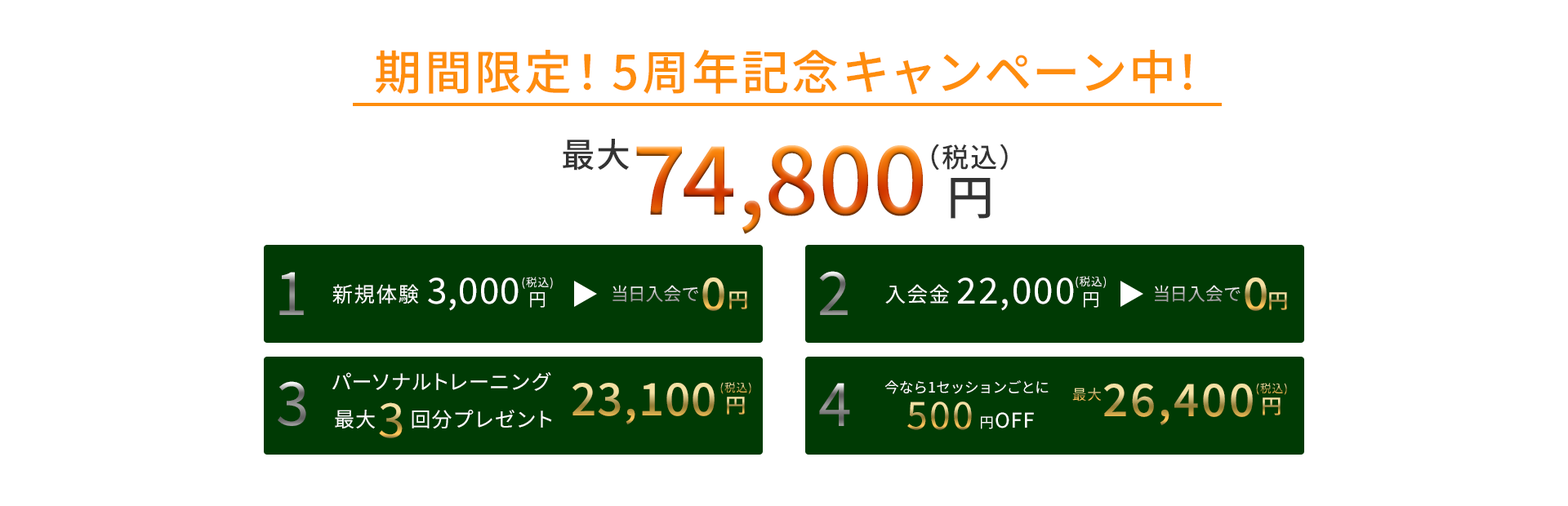
<style>
.page{position:relative;width:1568px;height:506px;background:#ffffff}
.page>*{position:absolute;margin:0}
.t1{font:47.6px "NotoSansCJKjp-Medium";letter-spacing:0.05em;color:#fe8d0d}
.t2{font:34px "NotoSansCJKjp-Medium";letter-spacing:0.05em;color:#333333}
.t3{font:95.3px "NotoSansCJKjp-Medium";letter-spacing:0.05em}
.t4{font:27.2px "NotoSansCJKjp-Medium";letter-spacing:0.05em;color:#333333}
.t5{font:47.6px "NotoSansCJKjp-Medium";letter-spacing:0.05em;color:#333333}
.t6{font:59.8px "NotoSansCJKjp-Regular";letter-spacing:0.05em}
.t7{font:35.9px "NotoSansCJKjp-Regular";letter-spacing:0.05em;color:#ffffff}
.t8{font:11.3px "NotoSansCJKjp-Regular";letter-spacing:0.05em;color:#ffffff}
.t9{font:44.9px "NotoSansCJKjp-Medium";letter-spacing:0.05em}
.t10{font:20.9px "NotoSansCJKjp-Regular";letter-spacing:0.05em;color:#ffffff}
.t11{font:18px "NotoSansCJKjp-Regular";letter-spacing:0.05em;color:#ffffff}
.t12{font:17.9px "NotoSansCJKjp-Regular";letter-spacing:0.05em}
.t13{font:20.9px "NotoSansCJKjp-Medium";letter-spacing:0.05em}
.t14{font:20.5px "NotoSansCJKjp-Regular";letter-spacing:0.05em;color:#ffffff}
.t15{font:11.3px "NotoSansCJKjp-Regular";letter-spacing:0.05em}
.t16{font:14.4px "NotoSansCJKjp-Regular";letter-spacing:0.05em;color:#ffffff}
.t17{font:14.4px "NotoSansCJKjp-Regular";letter-spacing:0.05em}
.t18{font:38px "NotoSansCJKjp-Regular";letter-spacing:0.05em}
.t19{font:47.6px "NotoSansCJKjp-Regular";letter-spacing:0.05em}
.t20{font:20.4px "NotoSansCJKjp-Regular";letter-spacing:0.05em;color:#ffffff}
</style>
<div class="page">
<p class="t1" style="left:376px;top:49px;width:816px;height:46px">期間限定！5周年記念キャンペーン中！</p>
<p class="t2" style="left:563px;top:139px;width:66px;height:32px">最大</p>
<p class="t3" style="left:636px;top:145px;width:287px;height:89px">74,800</p>
<p class="t4" style="left:931px;top:144px;width:77px;height:27px">（税込）</p>
<p class="t5" style="left:951px;top:178px;width:40px;height:41px">円</p>
<p class="t6" style="left:279px;top:272px;width:25px;height:43px">1</p>
<p class="t7" style="left:428px;top:278px;width:91px;height:33px">3,000</p>
<p class="t8" style="left:522px;top:277px;width:31px;height:12px">(税込)</p>
<p class="t9" style="left:702px;top:278px;width:22px;height:33px">0</p>
<p class="t6" style="left:819px;top:271px;width:29px;height:44px">2</p>
<p class="t7" style="left:957px;top:278px;width:117px;height:33px">22,000</p>
<p class="t8" style="left:1076px;top:276px;width:30px;height:12px">(税込)</p>
<p class="t9" style="left:1245px;top:278px;width:22px;height:33px">0</p>
<p class="t10" style="left:332px;top:284px;width:87px;height:20px">新規体験</p>
<p class="t11" style="left:530px;top:292px;width:15px;height:16px">円</p>
<p class="t12" style="left:612px;top:285px;width:86px;height:17px">当日入会で</p>
<p class="t13" style="left:729px;top:292px;width:18px;height:18px">円</p>
<p class="t10" style="left:885px;top:284px;width:64px;height:20px">入会金</p>
<p class="t11" style="left:1084px;top:292px;width:14px;height:16px">円</p>
<p class="t12" style="left:1155px;top:285px;width:86px;height:17px">当日入会で</p>
<p class="t13" style="left:1269px;top:292px;width:18px;height:18px">円</p>
<p class="t14" style="left:332px;top:372px;width:219px;height:19px">パーソナルトレーニング</p>
<p class="t6" style="left:278px;top:381px;width:28px;height:45px">3</p>
<p class="t9" style="left:572px;top:383px;width:143px;height:42px">23,100</p>
<p class="t15" style="left:720px;top:382px;width:31px;height:12px">(税込)</p>
<p class="t6" style="left:819px;top:383px;width:31px;height:43px">4</p>
<p class="t16" style="left:884px;top:381px;width:165px;height:13px">今なら1セッションごとに</p>
<p class="t17" style="left:1072px;top:388px;width:29px;height:14px">最大</p>
<p class="t9" style="left:1104px;top:384px;width:149px;height:41px">26,400</p>
<p class="t15" style="left:1256px;top:383px;width:31px;height:12px">(税込)</p>
<p class="t13" style="left:727px;top:397px;width:18px;height:18px">円</p>
<p class="t18" style="left:907px;top:402px;width:65px;height:28px">500</p>
<p class="t13" style="left:1263px;top:398px;width:18px;height:18px">円</p>
<p class="t14" style="left:335px;top:410px;width:40px;height:19px">最大</p>
<p class="t19" style="left:379px;top:403px;width:24px;height:36px">3</p>
<p class="t14" style="left:412px;top:410px;width:140px;height:19px">回分プレゼント</p>
<p class="t20" style="left:981px;top:412px;width:53px;height:18px"><span class="t16">円</span>OFF</p>
</div>
